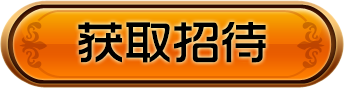
<style>
.page{position:relative;width:344px;height:88px}
.page>*{position:absolute;margin:0}
.t1{font:48px "TRENDS";color:#000000}
</style>
<div class="page">
<p class="t1" style="left:78px;top:22px;width:188px;height:41px">获取招待</p>
</div>
